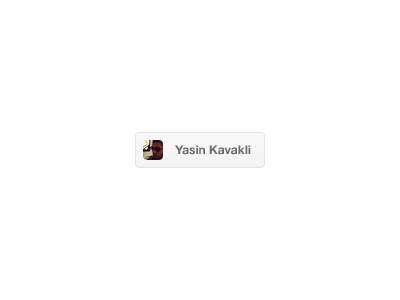
<style>
.page{position:relative;width:400px;height:300px;background:#ffffff}
.page>*{position:absolute;margin:0}
.t1{font:12px "HelveticaNeue-Bold";color:#6b6b6b}
</style>
<div class="page">
<p class="t1" style="left:175px;top:145px;width:76px;height:10px">Yasin Kavakli</p>
</div>
